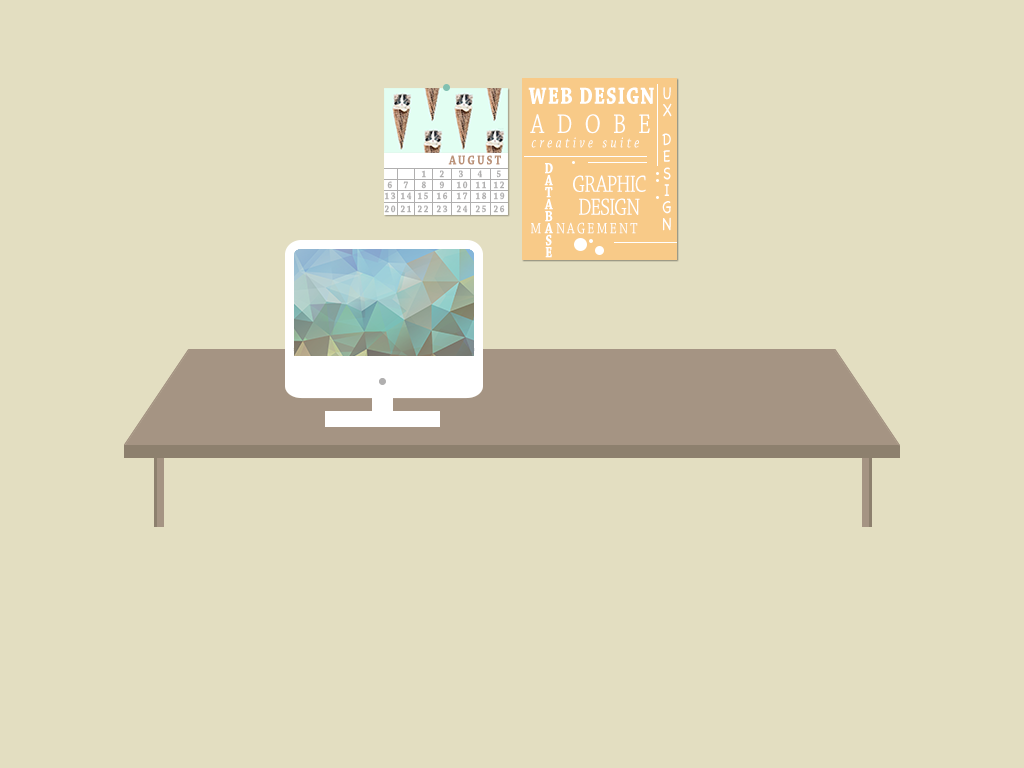
<style>
.page{position:relative;width:1024px;height:768px;background:#e3dec1}
.page>*{position:absolute;margin:0}
.t1{font:24.8px "ChaparralPro-Bold";letter-spacing:0.045em;color:#ffffff;scale:0.8 1}
.t2{font:17.7px/17px "ChalkboardSE-Light";letter-spacing:0.045em;color:#ffffff;scale:0.8 1}
.t3{font:28.3px "ChaparralPro-Regular";letter-spacing:0.545em;color:#ffffff;scale:0.8 1}
.t4{font:15.9px "ChaparralPro-Italic";letter-spacing:0.265em;color:#ffffff;scale:0.8 1}
.t5{font:13.8px "ChaparralPro-Bold";letter-spacing:0.165em;color:#bb9278;scale:0.82 1}
.t6{font:10.3px "ChaparralPro-Bold";letter-spacing:0.165em;color:#b0afaf;scale:0.82 1}
.t7{font:15.9px/12px "ChaparralPro-Bold";letter-spacing:-0.055em;color:#ffffff;scale:0.8 1}
.t8{font:24.8px/23px "ChaparralPro-Regular";letter-spacing:-0.055em;color:#ffffff;scale:0.8 1}
.t9{font:15.9px "ChaparralPro-Regular";letter-spacing:0.165em;color:#ffffff;scale:0.8 1}
.t10{font:15.9px "ChaparralPro-Regular";letter-spacing:-0.055em;color:#ffffff;scale:0.8 1}
</style>
<div class="page">
<p class="t1" style="left:528px;top:87px;width:126px;height:17px">WEB DESIGN</p>
<p class="t2" style="left:662px;top:87px;width:10px;height:144px;text-align:center">U<br>X<br><br>D<br>E<br>S<br>I<br>G<br>N</p>
<p class="t3" style="left:530px;top:114px;width:120px;height:20px">ADOBE</p>
<p class="t4" style="left:531px;top:137px;width:108px;height:11px">creative suite</p>
<p class="t5" style="left:448px;top:155px;width:54px;height:10px">AUGUST</p>
<p class="t6" style="left:421px;top:170px;width:5px;height:8px">1</p>
<p class="t6" style="left:439px;top:170px;width:5px;height:8px">2</p>
<p class="t6" style="left:459px;top:170px;width:4px;height:8px">3</p>
<p class="t6" style="left:477px;top:170px;width:5px;height:8px">4</p>
<p class="t6" style="left:496px;top:170px;width:5px;height:8px">5</p>
<p class="t7" style="left:544px;top:163px;width:9px;height:95px;text-align:center">D<br>A<br>T<br>A<br>B<br>A<br>S<br>E</p>
<p class="t6" style="left:387px;top:181px;width:5px;height:8px">6</p>
<p class="t6" style="left:403px;top:181px;width:5px;height:8px">7</p>
<p class="t6" style="left:421px;top:181px;width:5px;height:8px">8</p>
<p class="t6" style="left:439px;top:181px;width:5px;height:8px">9</p>
<p class="t6" style="left:456px;top:181px;width:12px;height:8px">10</p>
<p class="t6" style="left:475px;top:181px;width:11px;height:8px">11</p>
<p class="t6" style="left:493px;top:181px;width:11px;height:8px">12</p>
<p class="t8" style="left:573px;top:175px;width:73px;height:40px;text-align:center">GRAPHIC<br>DESIGN</p>
<p class="t6" style="left:384px;top:192px;width:12px;height:8px">13</p>
<p class="t6" style="left:400px;top:192px;width:12px;height:8px">14</p>
<p class="t6" style="left:417px;top:192px;width:11px;height:8px">15</p>
<p class="t6" style="left:436px;top:192px;width:12px;height:8px">16</p>
<p class="t6" style="left:456px;top:192px;width:12px;height:8px">17</p>
<p class="t6" style="left:475px;top:192px;width:12px;height:8px">18</p>
<p class="t6" style="left:493px;top:192px;width:12px;height:8px">19</p>
<p class="t6" style="left:384px;top:205px;width:12px;height:8px">20</p>
<p class="t6" style="left:400px;top:205px;width:11px;height:8px">21</p>
<p class="t6" style="left:417px;top:205px;width:11px;height:8px">22</p>
<p class="t6" style="left:436px;top:205px;width:12px;height:8px">23</p>
<p class="t6" style="left:456px;top:205px;width:12px;height:8px">24</p>
<p class="t6" style="left:475px;top:205px;width:11px;height:8px">25</p>
<p class="t6" style="left:493px;top:205px;width:12px;height:8px">26</p>
<p class="t9" style="left:556px;top:222px;width:82px;height:12px">NAGEMENT</p>
<p class="t10" style="left:531px;top:223px;width:10px;height:11px">M</p>
</div>
